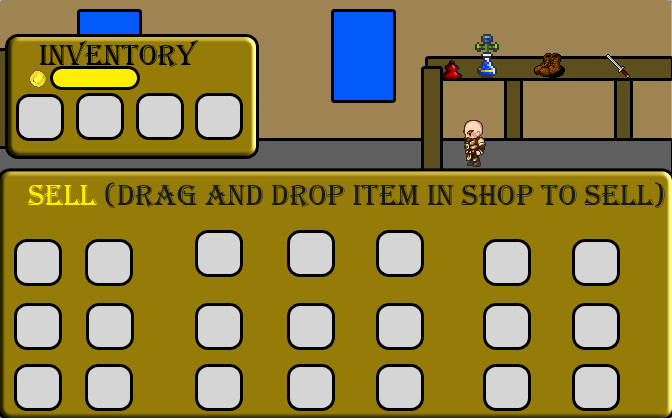
<style>
.page{position:relative;width:672px;height:418px;background:#957c09}
.page>*{position:absolute;margin:0}
.t1{font:30px "Algerian";color:#1a1a19}
.t2{font:30px "Algerian";color:#fff001}
</style>
<div class="page">
<p class="t1" style="left:27px;top:182px;width:638px;height:26px"><span class="t2">Sell </span>(Drag and drop item in shop to sell)</p>
</div>
